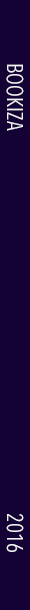
<style>
.page{position:relative;width:30px;height:610px;background:#150234}
.page>*{position:absolute;margin:0}
.t1{font:22.4px "AvenirNextCondensed-Regular";color:#eff3f6;scale:0.94 1}
</style>
<div class="page">
<p class="t1" style="left:6px;top:64px;width:18px;height:67px;rotate:90deg">BOOKIZA</p>
<p class="t1" style="left:6px;top:514px;width:18px;height:38px;rotate:90deg">2016</p>
</div>
